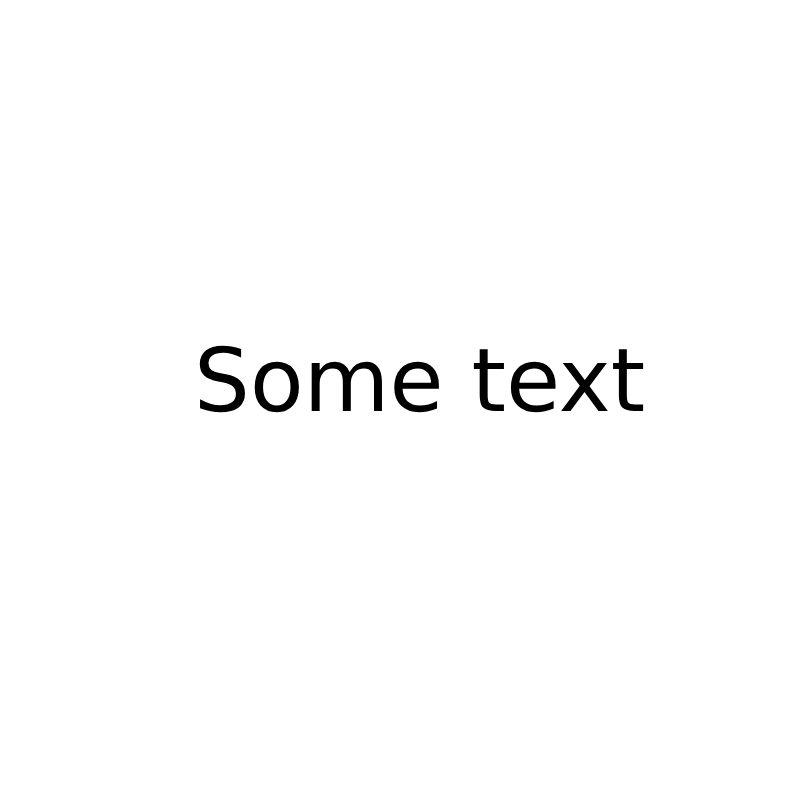
<style>
.page{position:relative;width:800px;height:800px;background:#ffffff}
.page>*{position:absolute;margin:0}
.t1{font:88px "DejaVuSans";color:#000000}
</style>
<div class="page">
<p class="t1" style="left:199px;top:345px;width:445px;height:68px">Some text</p>
</div>
